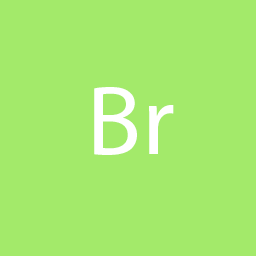
<style>
.page{position:relative;width:256px;height:256px;background:#a3ea6a}
.page>*{position:absolute;margin:0}
.t1{font:100px "MyriadPro-Regular";color:#ffffff}
</style>
<div class="page">
<p class="t1" style="left:94px;top:87px;width:80px;height:68px">Br</p>
</div>
